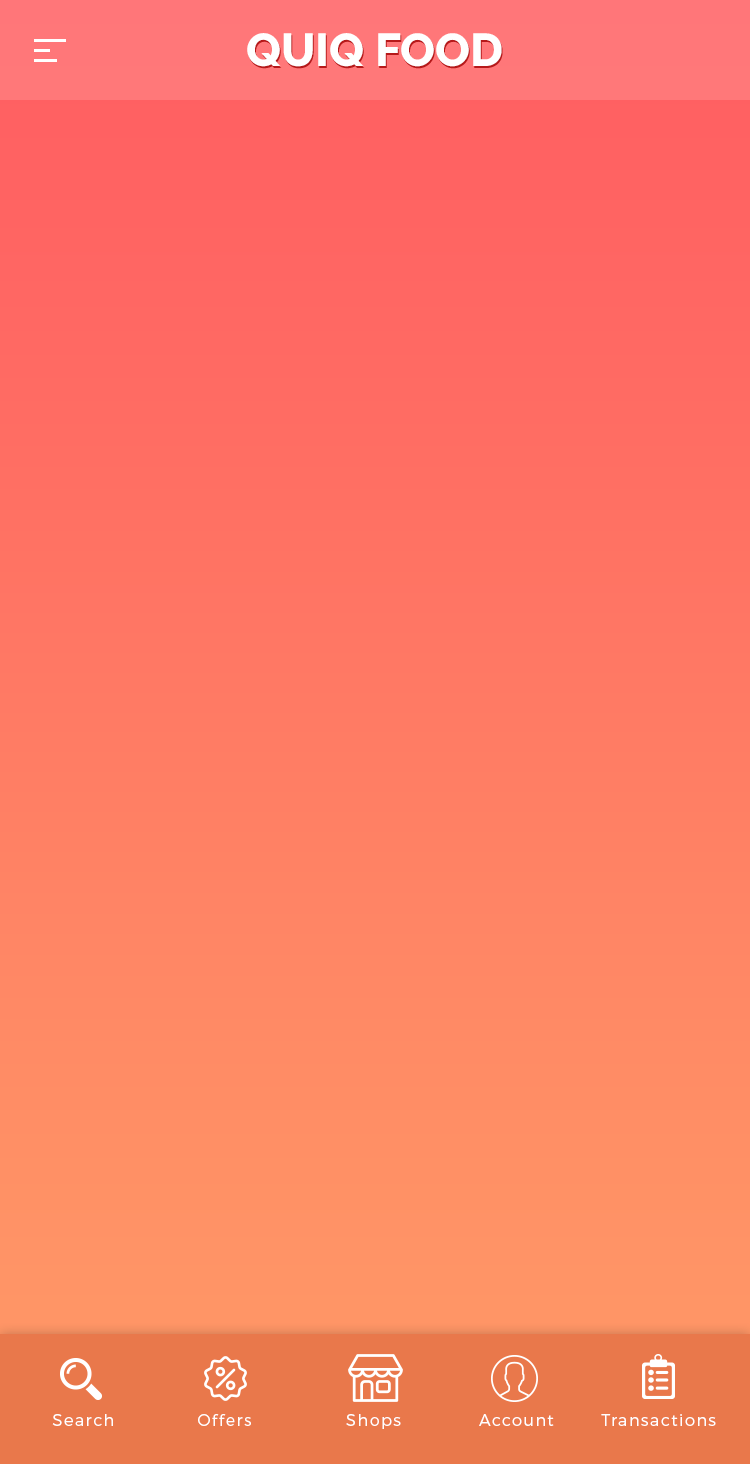
<style>
.page{position:relative;width:750px;height:1464px}
.page>*{position:absolute;margin:0}
.t1{font:46px "Raleway-ExtraBold";color:#ffffff;text-transform:uppercase}
.t2{font:16px "Montserrat-Light";letter-spacing:0.1em;color:#ffffff}
</style>
<div class="page">
<p class="t1" style="left:247px;top:33px;width:255px;height:34px">Quiq Food</p>
<p class="t2" style="left:52px;top:1414px;width:61px;height:12px">Search</p>
<p class="t2" style="left:198px;top:1414px;width:53px;height:12px">Offers</p>
<p class="t2" style="left:346px;top:1414px;width:55px;height:15px">Shops</p>
<p class="t2" style="left:479px;top:1414px;width:75px;height:12px">Account</p>
<p class="t2" style="left:601px;top:1414px;width:115px;height:12px">Transactions</p>
</div>
